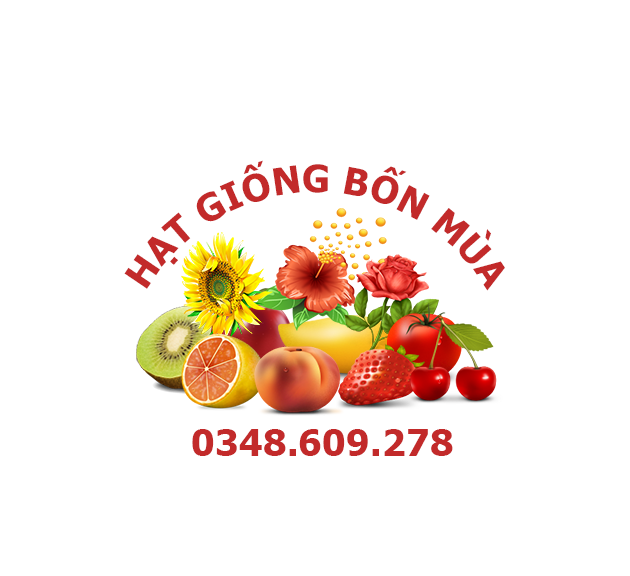
<style>
.page{position:relative;width:630px;height:576px;background:#ffffff}
.page>*{position:absolute;margin:0}
.t1{font:37.5px "Tahoma-Bold";color:#c22a2a}
</style>
<div class="page">
<p class="t1" style="left:124px;top:160px;width:381px;height:131px;rotate:4deg">HẠT GIỐNG BỐN MÙA</p>
<p class="t1" style="left:192px;top:429px;width:261px;height:27px">0348.609.278</p>
</div>
